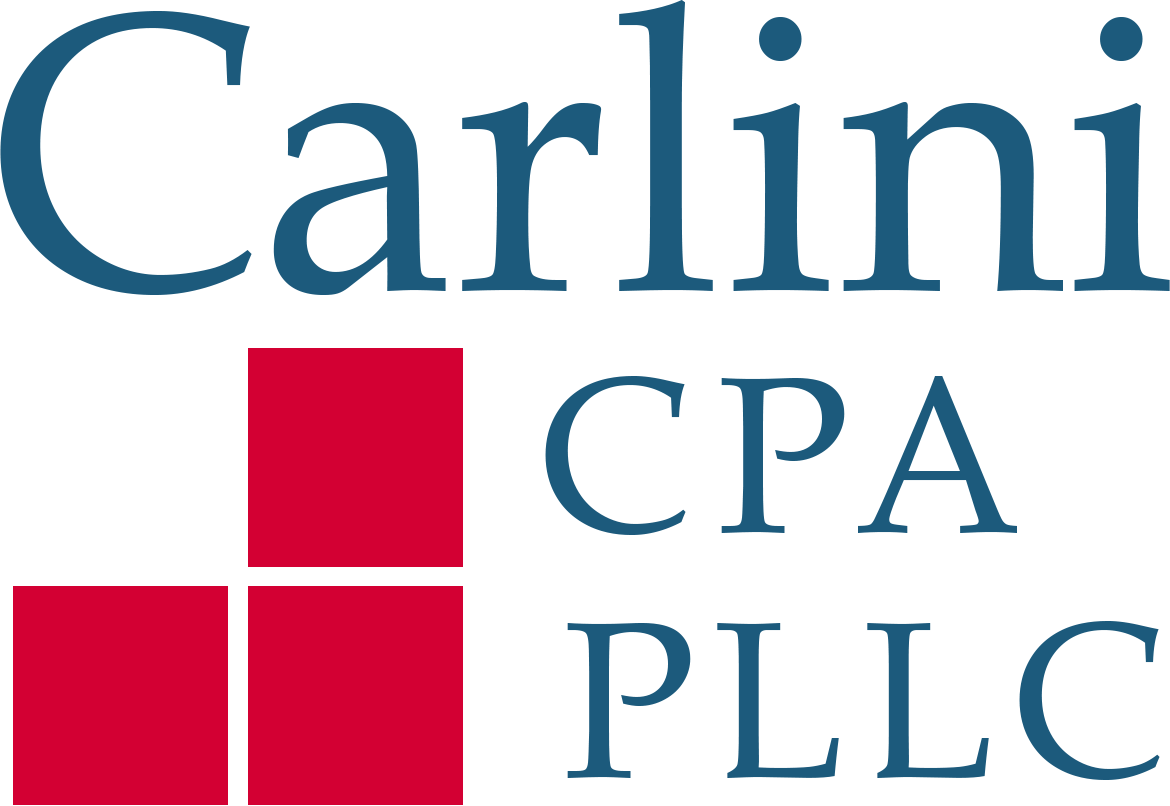
<style>
.page{position:relative;width:1170px;height:806px;background:#ffffff}
.page>*{position:absolute;margin:0}
.t1{font:398px "BookAntiqua";letter-spacing:0.005em;color:#1c5a7b;scale:0.97 1}
.t2{font:222px "BookAntiqua";letter-spacing:0.125em;color:#1c5a7b;scale:0.97 1}
.t3{font:222px "BookAntiqua";letter-spacing:0.085em;color:#1c5a7b;scale:0.97 1}
</style>
<div class="page">
<p class="t1" style="left:0px;top:0px;width:1170px;height:295px">Carlini</p>
<p class="t2" style="left:545px;top:376px;width:472px;height:159px">CPA</p>
<p class="t3" style="left:567px;top:621px;width:593px;height:159px">PLLC</p>
</div>
